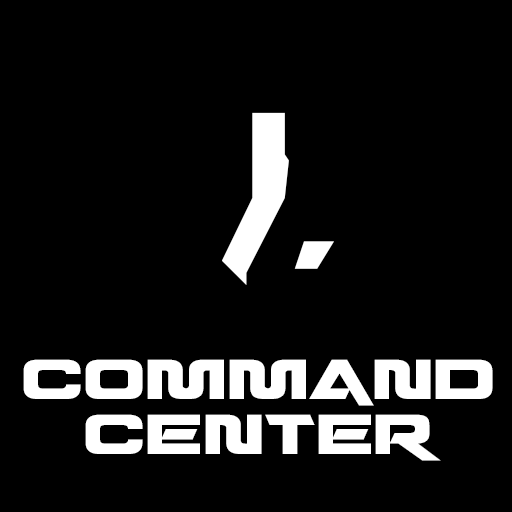
<style>
.page{position:relative;width:512px;height:512px;background:#000000}
.page>*{position:absolute;margin:0}
.t1{font:361.1px "DestronicGrafitti";color:#ffffff;font-variant:small-caps}
.t2{font:125.9px/55px "QuarkStorm";color:#ffffff;font-variant:small-caps}
</style>
<div class="page">
<p class="t1" style="left:222px;top:112px;width:112px;height:173px">y</p>
<p class="t2" style="left:23px;top:359px;width:470px;height:102px;text-align:center">command<br>center</p>
</div>
